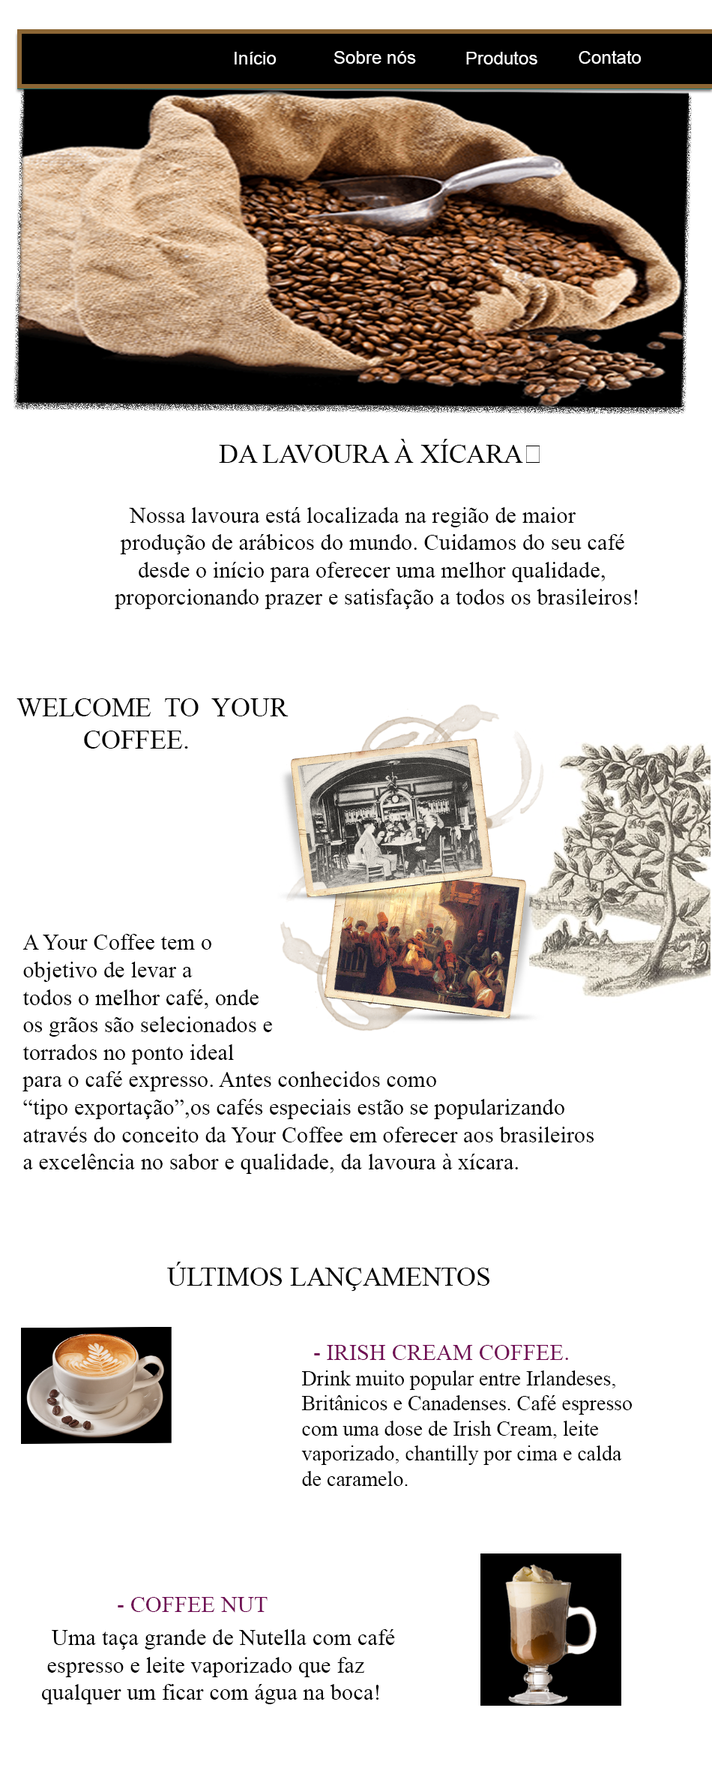
<style>
.page{position:relative;width:712px;height:1783px;background:#ffffff}
.page>*{position:absolute;margin:0}
.t1{font:7.1px "ArialMT";color:#ffffff}
.t2{font:26.7px "TimesNewRomanPSMT";color:#000000}
.t3{font:9px "TimesNewRomanPSMT";color:#000000}
.t4{font:21px "TimesNewRomanPSMT";color:#000000}
.t5{font:22.9px "TimesNewRomanPSMT";color:#591147}
.t6{font:22.9px "TimesNewRomanPSMT";color:#700c54}
.t7{font:9px "TimesNewRomanPSMT";color:#700c54}
.t8{font:22.9px "TimesNewRomanPSMT";color:#000000}
.t9{font:21px "TimesNewRomanPSMT";color:#591147}
</style>
<div class="page">
<p class="t1" style="left:235px;top:52px;width:42px;height:12px">Início</p>
<p class="t1" style="left:334px;top:51px;width:82px;height:13px">Sobre nós</p>
<p class="t1" style="left:466px;top:51px;width:72px;height:13px">Produtos</p>
<p class="t1" style="left:579px;top:50px;width:63px;height:14px">Contato</p>
<p class="t2" style="left:16px;top:698px;width:273px;height:50px">WELCOME  TO  YOUR<br>          COFFEE.</p>
<p class="t3" style="left:22px;top:934px;width:573px;height:240px">A Your Coffee tem o <br>objetivo de levar a <br>todos o melhor café, onde <br>os grãos são selecionados e <br>torrados no ponto ideal <br>para o café expresso. Antes conhecidos como <br>“tipo exportação”,os cafés especiais estão se popularizando <br>através do conceito da Your Coffee em oferecer aos brasileiros <br>a excelência no sabor e qualidade, da lavoura à xícara.</p>
<p class="t2" style="left:167px;top:1262px;width:323px;height:29px">ÚLTIMOS LANÇAMENTOS</p>
<p class="t4" style="left:302px;top:1345px;width:330px;height:141px"><span class="t5">  </span><span class="t6">- IRISH CREAM COFFEE.<br></span>Drink muito popular entre Irlandeses,<br>Britânicos e Canadenses. Café espresso<br>com uma dose de Irish Cream, leite<br>vaporizado, chantilly por cima e calda<br>de caramelo.</p>
<p class="t7" style="left:118px;top:1597px;width:150px;height:15px"><span class="t3">  </span>   - COFFEE NUT</p>
<p class="t8" style="left:42px;top:1629px;width:353px;height:75px"><span class="t9">  </span>Uma taça grande de Nutella com café <br> espresso e leite vaporizado que faz <br>qualquer um ficar com água na boca!</p>
</div>
